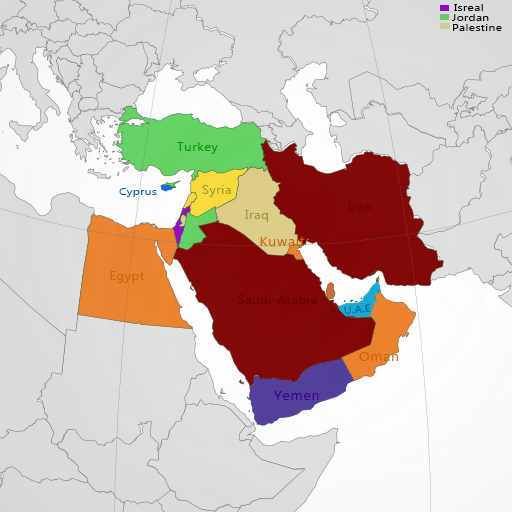
<style>
.page{position:relative;width:512px;height:512px}
.page>*{position:absolute;margin:0}
.t1{font:10.4px "MicrosoftNewTaiLue";letter-spacing:0.045em;color:#000000;scale:1.11 1}
.t2{font:11.6px "MicrosoftNewTaiLue";letter-spacing:0.045em;color:#009900;scale:1.11 1}
.t3{font:11.6px "MicrosoftNewTaiLue";letter-spacing:0.045em;color:#999933;scale:1.11 1}
.t4{font:10.4px "MicrosoftNewTaiLue";letter-spacing:0.045em;color:#006699;scale:1.11 1}
.t5{font:11.6px "MicrosoftNewTaiLue";letter-spacing:0.045em;color:#660000;scale:1.11 1}
.t6{font:12.8px "MicrosoftNewTaiLue";letter-spacing:0.045em;color:#cc6600;scale:1.11 1}
.t7{font:11.6px "MicrosoftNewTaiLue";letter-spacing:0.045em;color:#cc6600;scale:1.11 1}
.t8{font:9.7px "MicrosoftNewTaiLue";letter-spacing:0.045em;color:#006699;scale:1.11 1}
.t9{font:12.8px "MicrosoftNewTaiLue";letter-spacing:0.045em;color:#330099;scale:1.11 1}
</style>
<div class="page">
<p class="t1" style="left:454px;top:4px;width:29px;height:7px">Isreal</p>
<p class="t1" style="left:452px;top:14px;width:37px;height:7px">Jordan</p>
<p class="t1" style="left:453px;top:24px;width:49px;height:7px">Palestine</p>
<p class="t2" style="left:177px;top:142px;width:41px;height:12px">Turkey</p>
<p class="t3" style="left:202px;top:185px;width:29px;height:12px">Syria</p>
<p class="t4" style="left:119px;top:188px;width:38px;height:9px">Cyprus</p>
<p class="t5" style="left:348px;top:202px;width:23px;height:9px">Iran</p>
<p class="t3" style="left:245px;top:210px;width:23px;height:12px">Iraq</p>
<p class="t6" style="left:260px;top:236px;width:45px;height:10px">Kuwait</p>
<p class="t7" style="left:110px;top:271px;width:34px;height:12px">Egypt</p>
<p class="t5" style="left:238px;top:295px;width:79px;height:9px">Saudi-Arabia</p>
<p class="t8" style="left:344px;top:304px;width:27px;height:10px;rotate:-7deg">U.A.E</p>
<p class="t6" style="left:359px;top:352px;width:39px;height:9px">Oman</p>
<p class="t9" style="left:274px;top:391px;width:45px;height:9px">Yemen</p>
</div>
